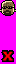
<style>
.page{position:relative;width:16px;height:64px;background:#ff00ff}
.page>*{position:absolute;margin:0}
.t1{font:16px "Bundy-Regular";letter-spacing:-0.01em;color:#ff0000;font-weight:bold}
</style>
<div class="page">
<p class="t1" style="left:3px;top:51px;width:10px;height:10px">x</p>
</div>
